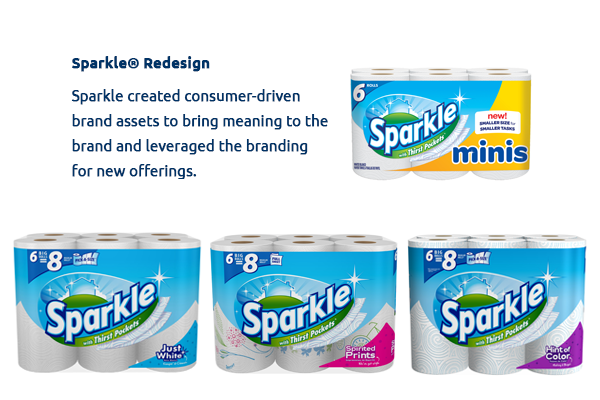
<style>
.page{position:relative;width:600px;height:400px;background:#ffffff}
.page>*{position:absolute;margin:0}
.t1{font:25px/25px "Ubuntu";color:#003366;font-weight:bold}
.t2{font:25px/37.5px "Ubuntu-Bold";color:#003366;font-weight:bold}
.t3{font:25px/33.3px "Ubuntu";color:#003366;font-weight:bold}
</style>
<div class="page">
<p class="t1" style="left:71px;top:56px;width:257px;height:123px"><span class="t2">Sparkle® Redesign<br></span><span class="t3">Sparkle created consumer-</span>driven <br>brand assets to bring meaning to the <br>brand and leveraged the branding <br>for new offerings.</p>
</div>
